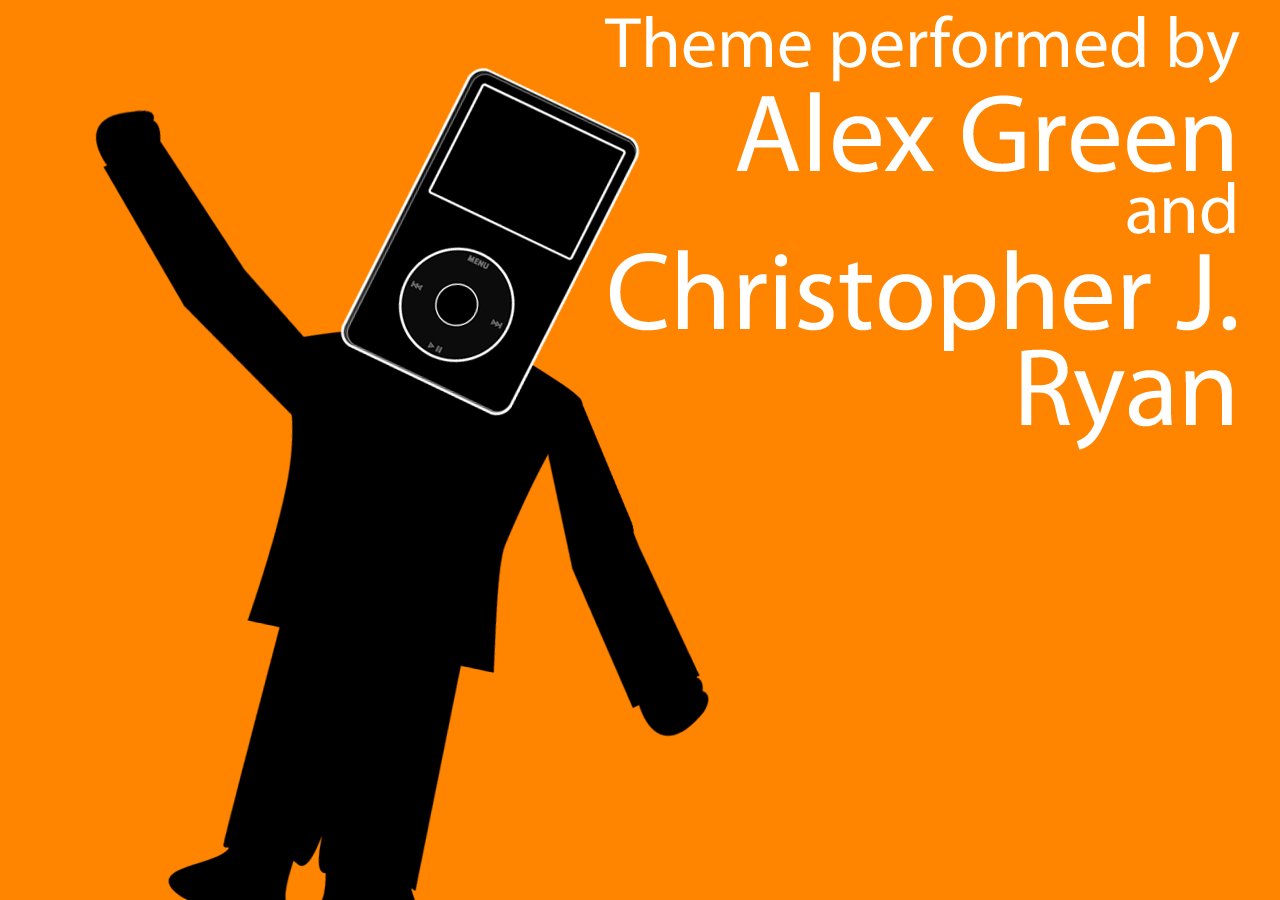
<style>
.page{position:relative;width:1280px;height:900px;background:#ff8400}
.page>*{position:absolute;margin:0}
.t1{font:111px/96px "MyriadPro-Regular";color:#ffffff}
.t2{font:72px/52px "MyriadPro-Regular";color:#ffffff}
.t3{font:111px/52px "MyriadPro-Regular";color:#ffffff}
.t4{font:72px/62px "MyriadPro-Regular";color:#ffffff}
</style>
<div class="page">
<p class="t1" style="left:605px;top:15px;width:635px;height:435px;text-align:right"><span class="t2">Theme performed by<br><br></span><span class="t3">Alex Green<br></span><span class="t4">and<br></span>Christopher J.<br>Ryan</p>
</div>
